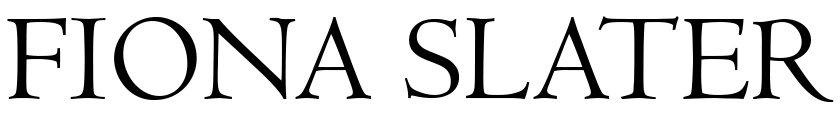
<style>
.page{position:relative;width:840px;height:114px;background:#ffffff}
.page>*{position:absolute;margin:0}
.t1{font:125px "Centaur";color:#000000}
</style>
<div class="page">
<p class="t1" style="left:7px;top:16px;width:827px;height:86px">FIONA SLATER</p>
</div>
